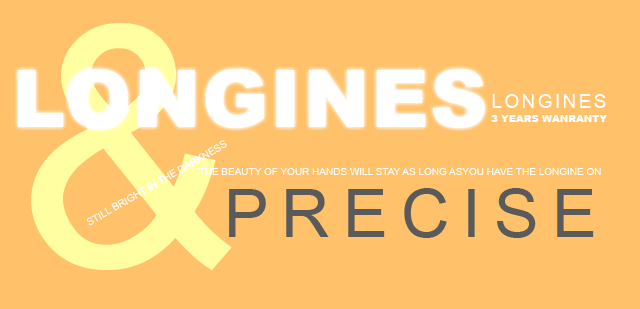
<style>
.page{position:relative;width:640px;height:309px;background:#ffc169}
.page>*{position:absolute;margin:0}
.t1{font:333.3px "ArialMT";letter-spacing:0.2em;color:#ffffa2}
.t2{font:80px "Arial-Black";letter-spacing:0.02em;color:#fefffe}
.t3{font:19.2px "ArialMT";letter-spacing:0.12em;color:#ffffff}
.t4{font:10px "Arial-Black";color:#ffffff}
.t5{font:10px "ArialMT";color:#fffefe}
.t6{font:10px "ArialMT";color:#ffffff}
.t7{font:66.7px "ArialMT";letter-spacing:0.2em;color:#5a5a5a}
</style>
<div class="page">
<p class="t1" style="left:31px;top:22px;width:201px;height:248px">&amp;</p>
<p class="t2" style="left:17px;top:69px;width:468px;height:59px">LONGINES</p>
<p class="t3" style="left:492px;top:94px;width:114px;height:14px">LONGINES</p>
<p class="t4" style="left:491px;top:115px;width:116px;height:7px">3 YEARS WANRANTY</p>
<p class="t5" style="left:86px;top:140px;width:141px;height:86px;rotate:-30deg">STILL BRIGHT IN THE DARKNESS</p>
<p class="t6" style="left:198px;top:168px;width:403px;height:7px">THE BEAUTY OF YOUR HANDS WILL STAY AS LONG ASYOU HAVE THE LONGINE ON</p>
<p class="t7" style="left:229px;top:188px;width:365px;height:50px">PRECISE</p>
</div>
